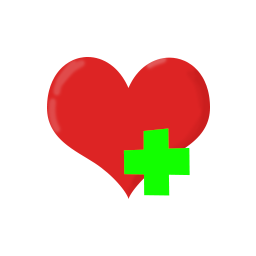
<style>
.page{position:relative;width:256px;height:256px;background:#ffffff}
.page>*{position:absolute;margin:0}
.t1{font:162.5px "LuckiestGuy-Regular";color:#12ff00}
</style>
<div class="page">
<p class="t1" style="left:123px;top:128px;width:67px;height:68px">+</p>
</div>
